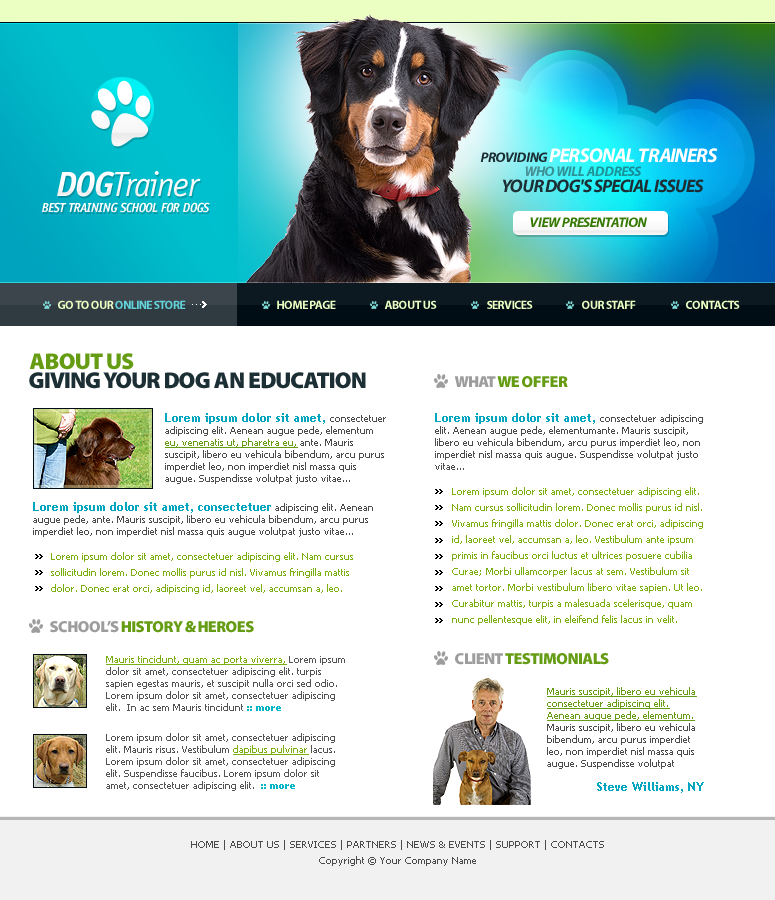
<style>
.page{position:relative;width:775px;height:900px;background:#ffffff}
.page>*{position:absolute;margin:0}
.t1{font:20px "MyriadPro-BoldIt";letter-spacing:-0.04em;color:#ffffff;text-transform:uppercase}
.t2{font:14px "MyriadPro-BoldIt";letter-spacing:-0.04em;color:#1c2f35;text-transform:uppercase}
.t3{font:35px "OfficinaSansStd-BookItalic";letter-spacing:-0.04em;color:#fbfbfb}
.t4{font:35px "OfficinaSansStd-BoldItalic";letter-spacing:-0.04em;color:#fbfbfb}
.t5{font:14px "MyriadPro-BoldIt";letter-spacing:-0.04em;color:#259297;text-transform:uppercase}
.t6{font:18px "MyriadPro-BoldIt";letter-spacing:-0.04em;color:#1c2f35;text-transform:uppercase}
.t7{font:13px "OfficinaSansStd-BoldItalic";letter-spacing:-0.04em;color:#fdfdfd}
.t8{font:14px "MyriadPro-BoldIt";letter-spacing:-0.04em;color:#367a03;text-transform:uppercase}
.t9{font:12px "MyriadPro-Bold";letter-spacing:-0.04em;color:#64d4dc;text-transform:uppercase}
.t10{font:12px "MyriadPro-Bold";letter-spacing:-0.04em;color:#ebffc3;text-transform:uppercase}
.t11{font:23px "MyriadPro-Black";letter-spacing:-0.04em;color:#659c13;text-transform:uppercase}
.t12{font:23px "MyriadPro-Black";letter-spacing:-0.04em;color:#1c2f35;text-transform:uppercase}
.t13{font:16px "MyriadPro-Black";letter-spacing:-0.04em;color:#659c13;text-transform:uppercase}
.t14{font:16px "MyriadPro-Black";letter-spacing:-0.04em;color:#9d9d9d;text-transform:uppercase}
.t15{font:10px/12px "Tahoma";color:#4b4b4b}
.t16{font:12px/12px "TrebuchetMS-Bold";color:#00a6bf}
.t17{font:10px/12px "Tahoma";color:#659c13;text-decoration:underline}
.t18{font:10px/16px "Tahoma";color:#7baf10}
.t19{font:10px/12px "Tahoma";color:#535353}
.t20{font:10px/12px "Tahoma";color:#7baf10;text-decoration:underline}
.t21{font:10px/12px "Tahoma-Bold";color:#00b5c6}
.t22{font:10px/16px "Tahoma";color:#4b4b4b}
</style>
<div class="page">
<p class="t1" style="left:480px;top:148px;width:238px;height:15px"><span class="t2">PROVIDING </span>PERSONAL TRAINERS</p>
<p class="t3" style="left:57px;top:171px;width:144px;height:26px"><span class="t4">DOG</span>Trainer</p>
<p class="t5" style="left:525px;top:166px;width:117px;height:10px">who will address</p>
<p class="t6" style="left:502px;top:179px;width:202px;height:14px">your dog's special issues</p>
<p class="t7" style="left:42px;top:202px;width:168px;height:11px">BEST TRAINING SCHOOL FOR DOGS</p>
<p class="t8" style="left:530px;top:217px;width:117px;height:10px">view presentation</p>
<p class="t9" style="left:58px;top:300px;width:128px;height:9px"><span class="t10">GO TO OUR </span>ONLINE STORE</p>
<p class="t10" style="left:277px;top:300px;width:59px;height:9px">HOME PAGE</p>
<p class="t10" style="left:384px;top:300px;width:53px;height:9px">ABOUT US</p>
<p class="t10" style="left:487px;top:300px;width:46px;height:9px">SERVICES</p>
<p class="t10" style="left:582px;top:300px;width:54px;height:9px">OUR STAFF</p>
<p class="t10" style="left:686px;top:300px;width:54px;height:9px">CONTACTS</p>
<p class="t11" style="left:29px;top:353px;width:105px;height:17px">ABOUT US</p>
<p class="t12" style="left:29px;top:372px;width:337px;height:17px">GIVING YOUR DOG AN EDUCATION</p>
<p class="t13" style="left:454px;top:376px;width:114px;height:12px"><span class="t14">WHAT </span>WE OFFER</p>
<p class="t15" style="left:165px;top:413px;width:221px;height:71px"><span class="t16">Lorem ipsum dolor sit amet, </span>consectetuer adipiscing elit. Aenean augue pede, elementum <span class="t17">eu, venenatis ut, pharetra eu, </span>ante. Mauris suscipit, libero eu vehicula bibendum, arcu purus imperdiet leo, non imperdiet nisl massa quis augue. Suspendisse volutpat justo vitae...</p>
<p class="t15" style="left:435px;top:413px;width:268px;height:57px"><span class="t16">Lorem ipsum dolor sit amet, </span>consectetuer adipiscing elit. Aenean augue pede, elementumante. Mauris suscipit, libero eu vehicula bibendum, arcu purus imperdiet leo, non imperdiet nisl massa quis augue. Suspendisse volutpat justo vitae...</p>
<p class="t18" style="left:452px;top:487px;width:251px;height:138px">Lorem ipsum dolor sit amet, consectetuer adipiscing elit. Nam cursus sollicitudin lorem. Donec mollis purus id nisl. Vivamus fringilla mattis dolor. Donec erat orci, adipiscing id, laoreet vel, accumsan a, leo. Vestibulum ante ipsum primis in faucibus orci luctus et ultrices posuere cubilia Curae; Morbi ullamcorper lacus at sem. Vestibulum sit amet tortor. Morbi vestibulum libero vitae sapien. Ut leo. Curabitur mattis, turpis a malesuada scelerisque, quam nunc pellentesque elit, in eleifend felis lacus in velit.</p>
<p class="t15" style="left:33px;top:502px;width:340px;height:35px"><span class="t16">Lorem ipsum dolor sit amet, consectetuer </span>adipiscing elit. Aenean augue pede, ante. Mauris suscipit, libero eu vehicula bibendum, arcu purus imperdiet leo, non imperdiet nisl massa quis augue volutpat justo vitae...</p>
<p class="t18" style="left:51px;top:552px;width:302px;height:42px">Lorem ipsum dolor sit amet, consectetuer adipiscing elit. Nam cursus sollicitudin lorem. Donec mollis purus id nisl. Vivamus fringilla mattis dolor. Donec erat orci, adipiscing id, laoreet vel, accumsan a, leo.</p>
<p class="t13" style="left:50px;top:620px;width:204px;height:13px"><span class="t14">SCHOOL’S </span>HISTORY &amp; HEROES</p>
<p class="t13" style="left:455px;top:653px;width:154px;height:12px"><span class="t14">CLIENT </span>TESTIMONIALS</p>
<p class="t19" style="left:106px;top:655px;width:239px;height:56px"><span class="t20">Mauris tincidunt, quam ac porta viverra,</span> Lorem ipsum dolor sit amet, consectetuer adipiscing elit. turpis sapien egestas mauris, et suscipit nulla orci sed odio. Lorem ipsum dolor sit amet, consectetuer adipiscing elit.  In ac sem Mauris tincidunt<span class="t21"> :: more</span></p>
<p class="t15" style="left:547px;top:687px;width:157px;height:106px"><span class="t17">Mauris suscipit, libero eu vehicula consectetuer adipiscing elit. Aenean augue pede, elementum. </span>Mauris suscipit, libero eu vehicula bibendum, arcu purus imperdiet leo, non imperdiet nisl massa quis augue. Suspendisse volutpat<br><br><span class="t16">Steve Williams, NY</span></p>
<p class="t19" style="left:106px;top:733px;width:229px;height:58px">Lorem ipsum dolor sit amet, consectetuer adipiscing elit. Mauris risus. Vestibulum <span class="t20">dapibus pulvinar</span> lacus. Lorem ipsum dolor sit amet, consectetuer adipiscing elit. Suspendisse faucibus. Lorem ipsum dolor sit amet, consectetuer adipiscing elit.  <span class="t21">:: more</span></p>
<p class="t22" style="left:191px;top:840px;width:413px;height:26px;text-align:center">HOME | ABOUT US | SERVICES | PARTNERS | NEWS &amp; EVENTS | SUPPORT | CONTACTS<br>Copyright © Your Company Name</p>
</div>
